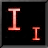
<style>
.page{position:relative;width:48px;height:48px;background:#000000}
.page>*{position:absolute;margin:0}
.t1{font:30px "Bender";scale:1.25 1}
</style>
<div class="page">
<p class="t1" style="left:8px;top:8px;width:32px;height:32px">I I</p>
</div>
